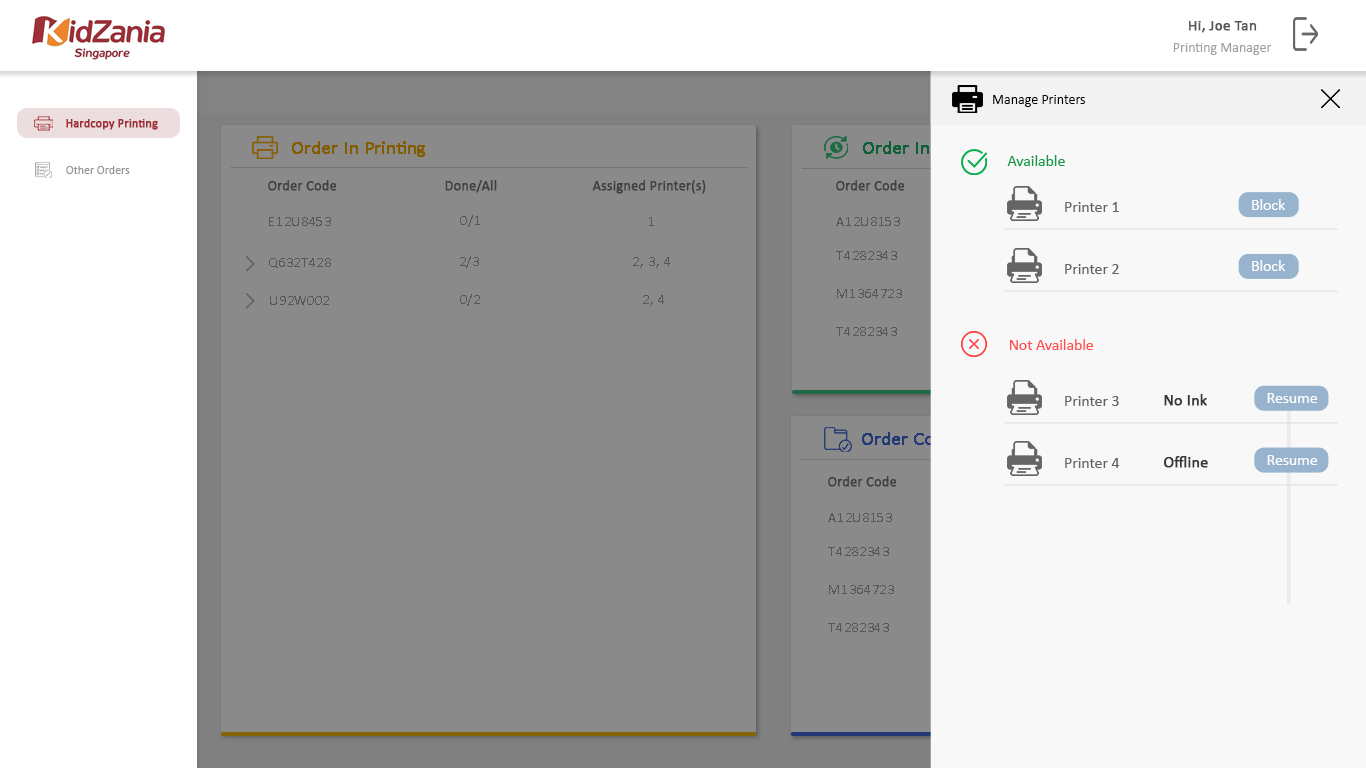
<style>
.page{position:relative;width:1366px;height:768px;background:#8a8a8a}
.page>*{position:absolute;margin:0}
.t1{font:15px "Calibri";color:#585858;font-weight:bold}
.t2{font:14px "Calibri";color:#9f9f9f}
.t3{font:14px "Calibri";color:#000000}
.t4{font:12px "Calibri";color:#9f3037;font-weight:bold}
.t5{font:18px "Calibri";color:#845d00;font-weight:bold}
.t6{font:18px "Calibri";font-weight:bold}
.t7{font:15.7px "Calibri";color:#109a47}
.t8{font:12px "Calibri";color:#959595}
.t9{font:14px "Calibri";color:#3f3f3f;font-weight:bold}
.t10{font:15.7px "Calibri";color:#636363}
.t11{font:15.7px "Calibri";color:#ffffff}
.t12{font:14px "Calibri";letter-spacing:0.05em;color:#575757}
.t13{font:15.7px "Calibri";color:#fe4e4e}
.t14{font:15.7px "Calibri";color:#373737;font-weight:bold}
</style>
<div class="page">
<p class="t1" style="left:1189px;top:21px;width:68px;height:12px">Hi, Joe Tan</p>
<p class="t2" style="left:1173px;top:43px;width:99px;height:12px">Printing Manager</p>
<p class="t3" style="left:993px;top:95px;width:92px;height:12px">Manage Printers</p>
<p class="t4" style="left:66px;top:119px;width:92px;height:11px">Hardcopy Printing</p>
<p class="t5" style="left:292px;top:141px;width:133px;height:16px">Order In Printing</p>
<p class="t6" style="left:863px;top:141px;width:124px;height:15px">Order In Queue</p>
<p class="t7" style="left:1007px;top:155px;width:58px;height:11px">Available</p>
<p class="t8" style="left:66px;top:166px;width:64px;height:8px">Other Orders</p>
<p class="t9" style="left:268px;top:180px;width:69px;height:11px">Order Code</p>
<p class="t9" style="left:445px;top:180px;width:52px;height:13px">Done/All</p>
<p class="t9" style="left:592px;top:180px;width:114px;height:14px">Assigned Printer(s)</p>
<p class="t9" style="left:836px;top:180px;width:69px;height:11px">Order Code</p>
<p class="t10" style="left:1065px;top:202px;width:54px;height:10px">Printer 1</p>
<p class="t11" style="left:1252px;top:199px;width:34px;height:11px">Block</p>
<p class="t12" style="left:269px;top:217px;width:62px;height:9px">E12U8453</p>
<p class="t12" style="left:460px;top:215px;width:20px;height:12px">0/1</p>
<p class="t12" style="left:649px;top:217px;width:5px;height:9px">1</p>
<p class="t12" style="left:836px;top:217px;width:64px;height:9px">A12U8153</p>
<p class="t12" style="left:460px;top:256px;width:19px;height:12px">2/3</p>
<p class="t12" style="left:633px;top:257px;width:37px;height:11px">2, 3, 4</p>
<p class="t12" style="left:836px;top:251px;width:61px;height:9px">T4282343</p>
<p class="t12" style="left:269px;top:258px;width:62px;height:10px">Q632T428</p>
<p class="t10" style="left:1065px;top:264px;width:54px;height:10px">Printer 2</p>
<p class="t11" style="left:1252px;top:260px;width:34px;height:11px">Block</p>
<p class="t12" style="left:460px;top:294px;width:20px;height:12px">0/2</p>
<p class="t12" style="left:837px;top:289px;width:65px;height:9px">M1364723</p>
<p class="t12" style="left:270px;top:296px;width:59px;height:9px">U92W002</p>
<p class="t12" style="left:643px;top:295px;width:21px;height:11px">2, 4</p>
<p class="t12" style="left:836px;top:327px;width:61px;height:9px">T4282343</p>
<p class="t12" style="left:836px;top:327px;width:61px;height:9px">T4282343</p>
<p class="t13" style="left:1010px;top:339px;width:84px;height:11px">Not Available</p>
<p class="t10" style="left:1065px;top:396px;width:54px;height:10px">Printer 3</p>
<p class="t14" style="left:1164px;top:394px;width:43px;height:12px">No Ink</p>
<p class="t11" style="left:1267px;top:393px;width:51px;height:10px">Resume</p>
<p class="t10" style="left:1065px;top:458px;width:55px;height:10px">Printer 4</p>
<p class="t14" style="left:1163px;top:456px;width:45px;height:12px">Offline</p>
<p class="t11" style="left:1267px;top:455px;width:51px;height:10px">Resume</p>
<p class="t9" style="left:828px;top:476px;width:69px;height:11px">Order Code</p>
<p class="t12" style="left:828px;top:513px;width:64px;height:9px">A12U8153</p>
<p class="t12" style="left:828px;top:547px;width:61px;height:9px">T4282343</p>
<p class="t12" style="left:829px;top:585px;width:65px;height:9px">M1364723</p>
<p class="t12" style="left:828px;top:623px;width:61px;height:9px">T4282343</p>
<p class="t12" style="left:828px;top:623px;width:61px;height:9px">T4282343</p>
</div>
